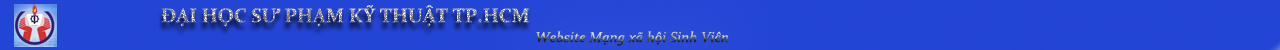
<style>
.page{position:relative;width:1280px;height:50px;background:#2345d6}
.page>*{position:absolute;margin:0}
.t1{font:19.4px "Constantia-Bold"}
.t2{font:14.6px "Constantia-Italic"}
</style>
<div class="page">
<p class="t1" style="left:161px;top:5px;width:368px;height:22px">ĐẠI HỌC SƯ PHẠM KỸ THUẬT TP.HCM</p>
<p class="t2" style="left:536px;top:31px;width:193px;height:15px">Website Mạng xã hội Sinh Viên</p>
</div>
